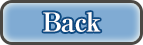
<style>
.page{position:relative;width:143px;height:45px;background:#80abd3}
.page>*{position:absolute;margin:0}
.t1{font:26px "RyuminPro-ExBold";letter-spacing:-0.04em;color:#ffffff}
</style>
<div class="page">
<p class="t1" style="left:43px;top:12px;width:58px;height:20px">Back</p>
</div>
